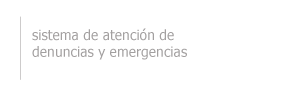
<style>
.page{position:relative;width:300px;height:100px;background:#ffffff}
.page>*{position:absolute;margin:0}
.t1{font:14px "Tahoma";color:#a3a0a0}
</style>
<div class="page">
<p class="t1" style="left:32px;top:28px;width:155px;height:32px">sistema de atención de <br>denuncias y emergencias</p>
</div>
